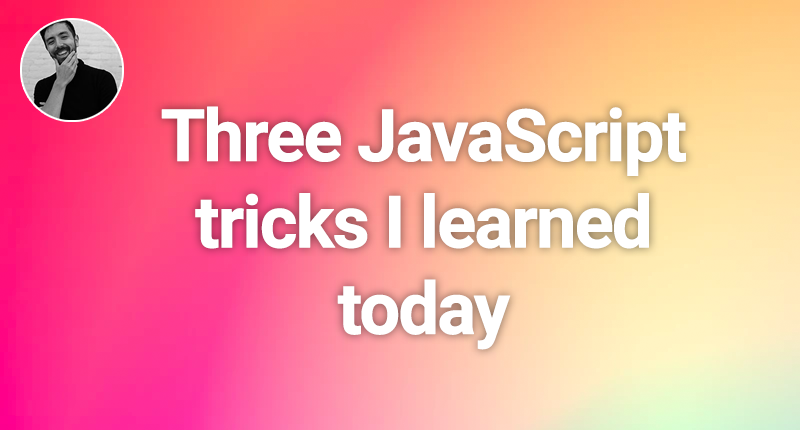
<style>
.page{position:relative;width:800px;height:430px}
.page>*{position:absolute;margin:0}
.t1{font:72px "Roboto-Bold";letter-spacing:-0.05em;color:#ffffff;font-weight:bold}
</style>
<div class="page">
<p class="t1" style="left:161px;top:106px;width:525px;height:244px;text-align:center">Three JavaScript tricks I learned today</p>
</div>
